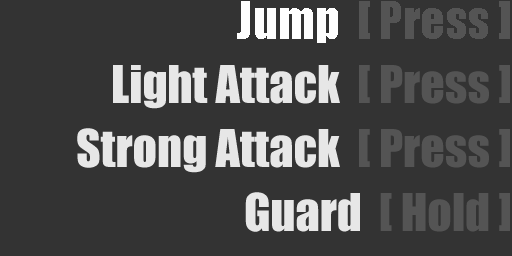
<style>
.page{position:relative;width:512px;height:256px;background:#333333}
.page>*{position:absolute;margin:0}
.t1{font:48px "Impact";color:#545454}
.t2{font:48px "Impact";color:#ffffff}
.t3{font:48px "Impact";color:#e7e7e7}
</style>
<div class="page">
<p class="t1" style="left:237px;top:1px;width:273px;height:42px"><span class="t2">Jump  </span>[ Press ]</p>
<p class="t3" style="left:113px;top:65px;width:397px;height:44px">Light Attack  <span class="t1">[ Press ]</span></p>
<p class="t3" style="left:77px;top:128px;width:433px;height:45px">Strong Attack  <span class="t1">[ Press ]</span></p>
<p class="t1" style="left:245px;top:192px;width:265px;height:40px"><span class="t3">Guard  </span>[ Hold ]</p>
</div>
